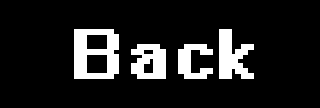
<style>
.page{position:relative;width:320px;height:108px;background:#000000}
.page>*{position:absolute;margin:0}
.t1{font:62.5px "System";letter-spacing:0.05em;color:#ffffff;font-weight:bold;scale:1.1 1}
</style>
<div class="page">
<p class="t1" style="left:74px;top:29px;width:180px;height:50px">Back</p>
</div>
